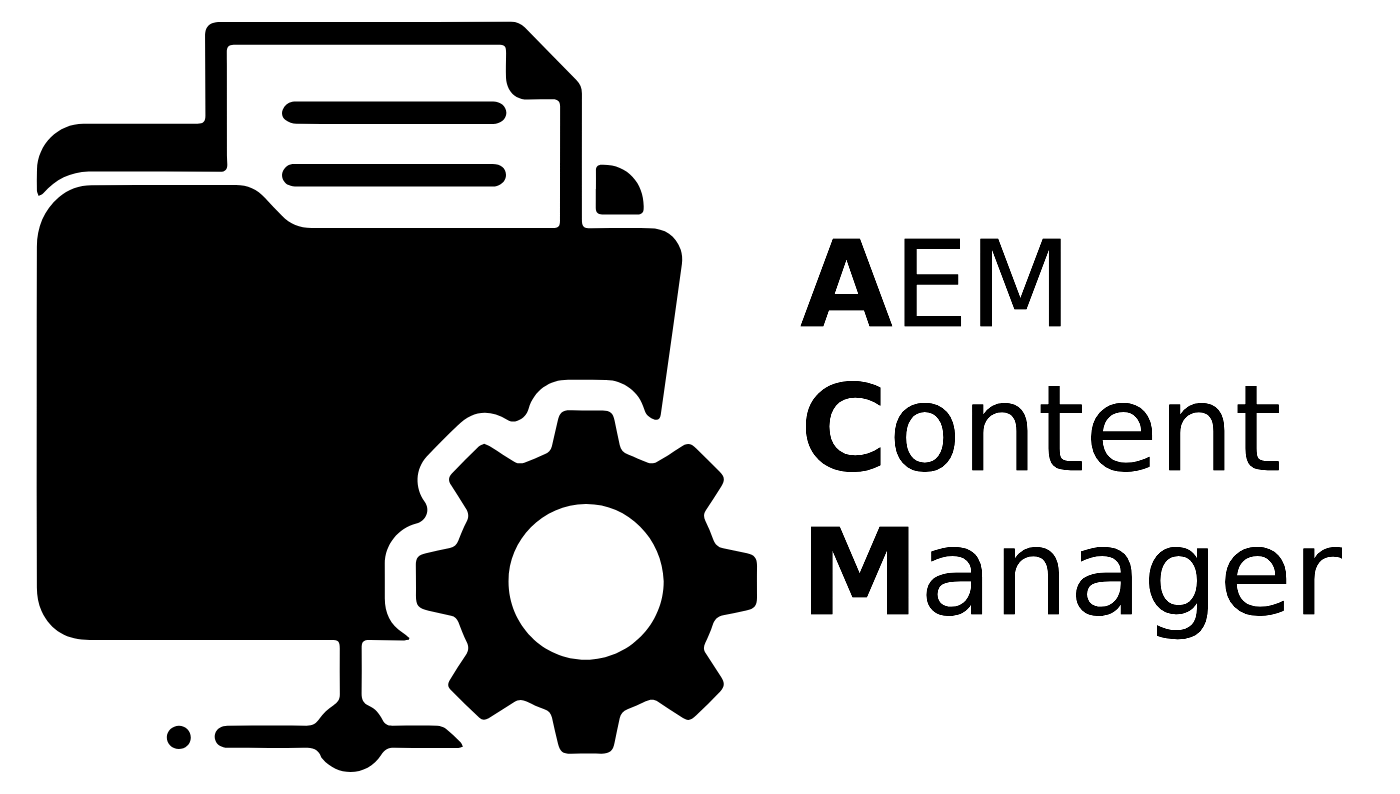
<style>
.page{position:relative;width:1400px;height:794px;background:#ffffff}
.page>*{position:absolute;margin:0}
.t1{font:120px "DejaVuSans";color:#000000}
.t2{font:120px "DejaVuSans-Bold";color:#000000}
</style>
<div class="page">
<p class="t1" style="left:800px;top:238px;width:542px;height:402px"><span class="t2">A</span>EM<br><span class="t2">C</span>ontent<br><span class="t2">M</span>anager</p>
</div>
